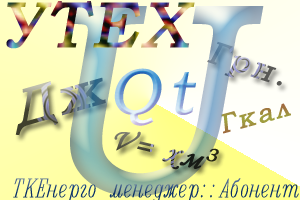
<style>
.page{position:relative;width:300px;height:200px}
.page>*{position:absolute;margin:0}
.t1{font:63.5px "BookmanOldStyle";letter-spacing:0.1em;font-weight:bold;font-style:italic}
.t2{font:264.6px "BookmanOldStyle";letter-spacing:0.1em;font-weight:bold;font-style:italic}
.t3{font:31.8px "BookmanOldStyle";letter-spacing:0.1em;font-weight:bold;font-style:italic}
.t4{font:50.8px "BookmanOldStyle";letter-spacing:0.1em;font-weight:bold;font-style:italic}
.t5{font:26.5px "BookmanOldStyle";letter-spacing:0.1em;color:#a0943f;font-weight:bold;font-style:italic}
.t6{font:31.7px "MonotypeCorsiva";letter-spacing:0.1em;font-weight:bold;font-style:italic}
.t7{font:31.7px "BookmanOldStyle";letter-spacing:0.1em;font-weight:bold;font-style:italic}
</style>
<div class="page">
<p class="t1" style="left:6px;top:1px;width:189px;height:48px">УТЕХ</p>
<p class="t2" style="left:66px;top:6px;width:198px;height:191px">U</p>
<p class="t3" style="left:207px;top:41px;width:75px;height:45px;rotate:18deg">Грн.</p>
<p class="t4" style="left:15px;top:77px;width:91px;height:59px;rotate:-16deg">Дж</p>
<p class="t1" style="left:114px;top:68px;width:82px;height:58px">Qt</p>
<p class="t5" style="left:221px;top:103px;width:70px;height:31px;rotate:-15deg">Гкал</p>
<p class="t6" style="left:114px;top:131px;width:105px;height:39px;rotate:14deg">V= xм<span class="t7">3</span></p>
</div>
